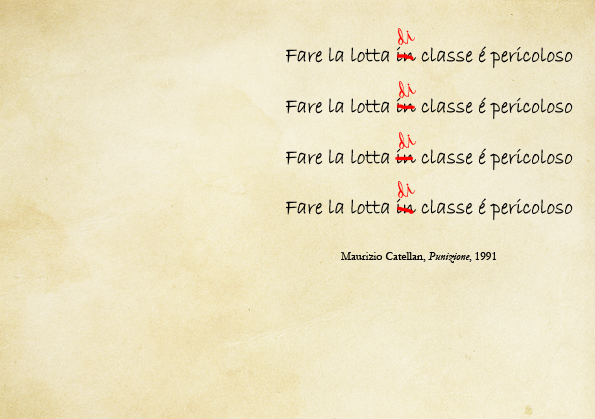
<style>
.page{position:relative;width:595px;height:419px}
.page>*{position:absolute;margin:0}
.t1{font:21.2px "Gigi-Regular";color:#ff0000}
.t2{font:21.2px "BradleyHandITC";color:#000000}
.t3{font:12px "Garamond";color:#000000}
.t4{font:12px "Garamond-Italic";color:#000000}
</style>
<div class="page">
<p class="t1" style="left:398px;top:28px;width:17px;height:17px;rotate:-22deg">di</p>
<p class="t2" style="left:286px;top:46px;width:287px;height:175px">Fare la lotta in classe é pericoloso<br><br>Fare la lotta in classe é pericoloso<br><br>Fare la lotta in classe é pericoloso<br><br>Fare la lotta in classe é pericoloso</p>
<p class="t1" style="left:399px;top:81px;width:17px;height:17px;rotate:-22deg">di</p>
<p class="t1" style="left:399px;top:132px;width:17px;height:17px;rotate:-22deg">di</p>
<p class="t1" style="left:398px;top:181px;width:17px;height:17px;rotate:-22deg">di</p>
<p class="t3" style="left:341px;top:252px;width:155px;height:11px">Maurizio Catellan, <span class="t4">Punizione</span>, 1991</p>
</div>
